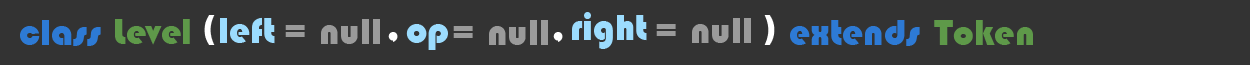
<style>
.page{position:relative;width:1250px;height:65px;background:#333333}
.page>*{position:absolute;margin:0}
.t1{font:37.7px "Bauhaus93";color:#ffffff}
.t2{font:37.7px "Bauhaus93";color:#9cdcfe}
.t3{font:37.7px "Bauhaus93";color:#2d7ad5}
.t4{font:37px "Bauhaus93";color:#5e9949}
.t5{font:37.7px "Bauhaus93";color:#9a9a9a}
</style>
<div class="page">
<p class="t1" style="left:204px;top:15px;width:571px;height:30px">(                  ,                ,                     )</p>
<p class="t2" style="left:220px;top:17px;width:55px;height:27px">left</p>
<p class="t2" style="left:572px;top:12px;width:75px;height:37px">right</p>
<p class="t3" style="left:20px;top:20px;width:81px;height:26px">class</p>
<p class="t4" style="left:115px;top:19px;width:75px;height:26px">Level</p>
<p class="t5" style="left:285px;top:19px;width:95px;height:25px">= null</p>
<p class="t2" style="left:406px;top:24px;width:42px;height:26px">op</p>
<p class="t5" style="left:453px;top:20px;width:95px;height:25px">= null</p>
<p class="t5" style="left:656px;top:18px;width:95px;height:25px">= null</p>
<p class="t3" style="left:790px;top:20px;width:130px;height:26px">extends</p>
<p class="t4" style="left:934px;top:20px;width:99px;height:25px">Token</p>
</div>
